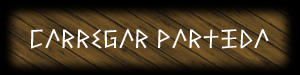
<style>
.page{position:relative;width:300px;height:75px}
.page>*{position:absolute;margin:0}
.t1{font:28px "Alfabetix";color:#ffffff}
</style>
<div class="page">
<p class="t1" style="left:31px;top:29px;width:238px;height:20px">carregar partida</p>
</div>
